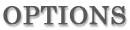
<style>
.page{position:relative;width:130px;height:30px;background:#ffffff}
.page>*{position:absolute;margin:0}
.t1{font:25px "Century";letter-spacing:0.01em;color:#595959;font-weight:bold}
</style>
<div class="page">
<p class="t1" style="left:3px;top:6px;width:123px;height:19px">OPTIONS</p>
</div>
